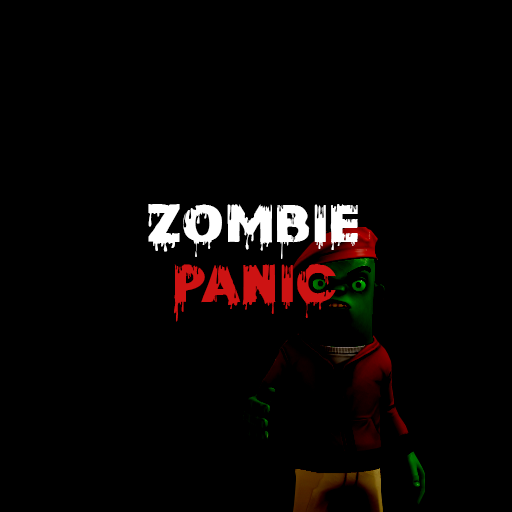
<style>
.page{position:relative;width:512px;height:512px;background:#000000}
.page>*{position:absolute;margin:0}
.t1{font:72px/60px "PaintDrops-Regular";color:#ffffff}
.t2{font:72px/60px "PaintDrops-Regular";color:#cd1313}
</style>
<div class="page">
<p class="t1" style="left:148px;top:204px;width:210px;height:118px;text-align:center">Zombie<br><span class="t2">Panic</span></p>
</div>
